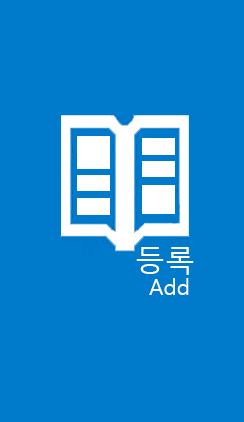
<style>
.page{position:relative;width:244px;height:422px;background:#007acb}
.page>*{position:absolute;margin:0}
.t1{font:30px "MalgunGothicRegular";color:#ffffff}
.t2{font:22px "MalgunGothicRegular";color:#ffffff}
</style>
<div class="page">
<p class="t1" style="left:136px;top:247px;width:58px;height:28px">등록</p>
<p class="t2" style="left:149px;top:278px;width:40px;height:17px">Add</p>
</div>
